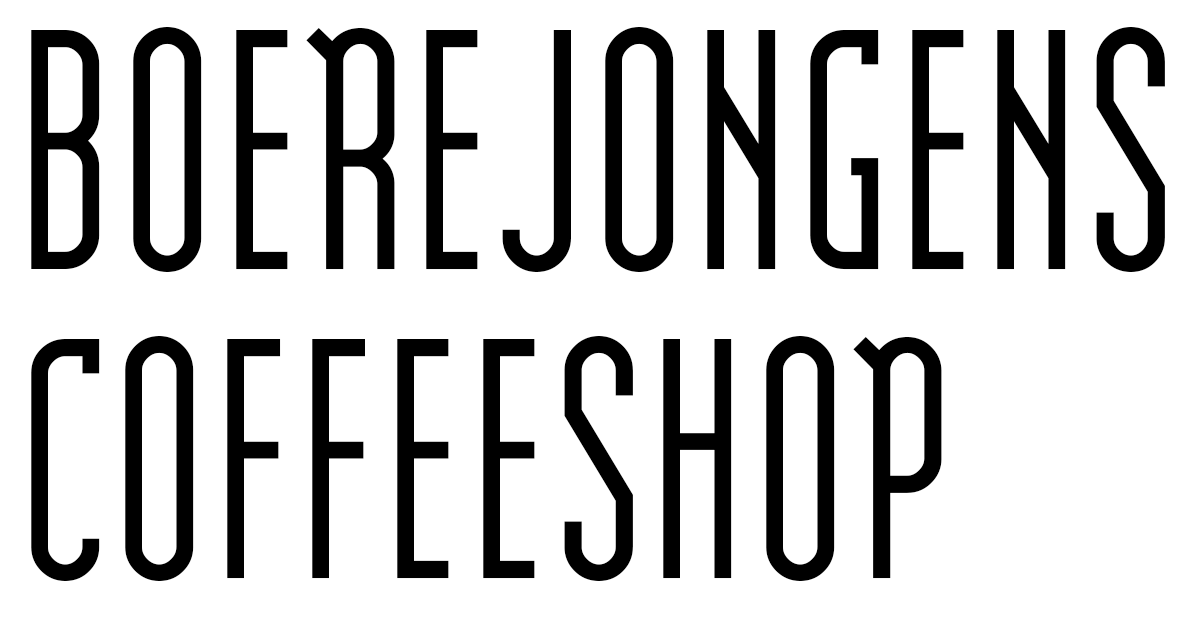
<style>
.page{position:relative;width:1200px;height:625px;background:#ffffff}
.page>*{position:absolute;margin:0}
.t1{font:584.7px/308.6px "Modula";color:#000000;font-variant:small-caps}
</style>
<div class="page">
<p class="t1" style="left:31px;top:27px;width:1134px;height:554px">boerejongens<br>coffeeshop</p>
</div>
